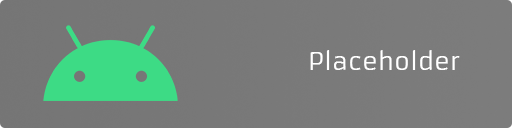
<style>
.page{position:relative;width:512px;height:128px}
.page>*{position:absolute;margin:0}
.t1{font:24px "Armata-Regular";color:#ffffff}
</style>
<div class="page">
<p class="t1" style="left:310px;top:50px;width:150px;height:20px">Placeholder</p>
</div>
